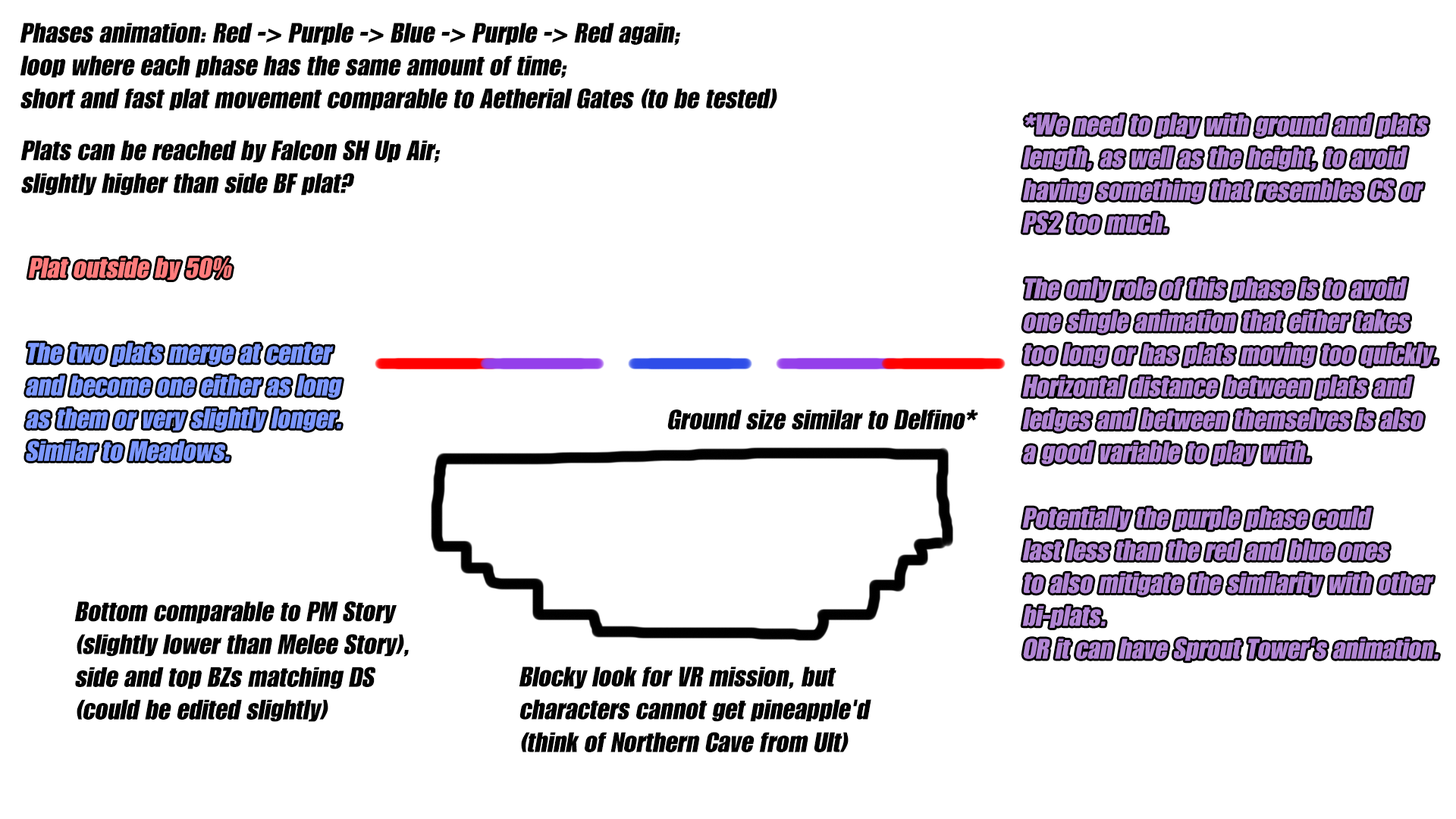
<style>
.page{position:relative;width:1456px;height:819px;background:#ffffff}
.page>*{position:absolute;margin:0}
.t1{font:27.3px "GENUINE";color:#000000;font-style:italic}
.t2{font:27.3px "GENUINE";color:#ff7c7c;font-style:italic}
.t3{font:27.3px "GENUINE";color:#7c98ff;font-style:italic}
</style>
<div class="page">
<p class="t1" style="left:20px;top:23px;width:757px;height:88px">Phases animation: Red -&gt; Purple -&gt; Blue -&gt; Purple -&gt; Red again;<br>loop where each phase has the same amount of time;<br>short and fast plat movement comparable to Aetherial Gates (to be tested)</p>
<p class="t1" style="left:20px;top:140px;width:421px;height:56px">Plats can be reached by Falcon SH Up Air;<br>slightly higher than side BF plat?</p>
<p class="t2" style="left:28px;top:258px;width:204px;height:22px">Plat outside by 50%</p>
<p class="t3" style="left:26px;top:343px;width:316px;height:118px">The two plats merge at center<br>and become one either as long<br>as them or very slightly longer.<br>Similar to Meadows.</p>
<p class="t1" style="left:667px;top:409px;width:311px;height:21px">Ground size similar to Delfino*</p>
<p class="t1" style="left:74px;top:601px;width:335px;height:121px">Bottom comparable to PM Story<br>(slightly lower than Melee Story),<br>side and top BZs matching DS<br>(could be edited slightly)</p>
<p class="t1" style="left:519px;top:667px;width:352px;height:85px">Blocky look for VR mission, but<br>characters cannot get pineapple'd<br>(think of Northern Cave from Ult)</p>
</div>
